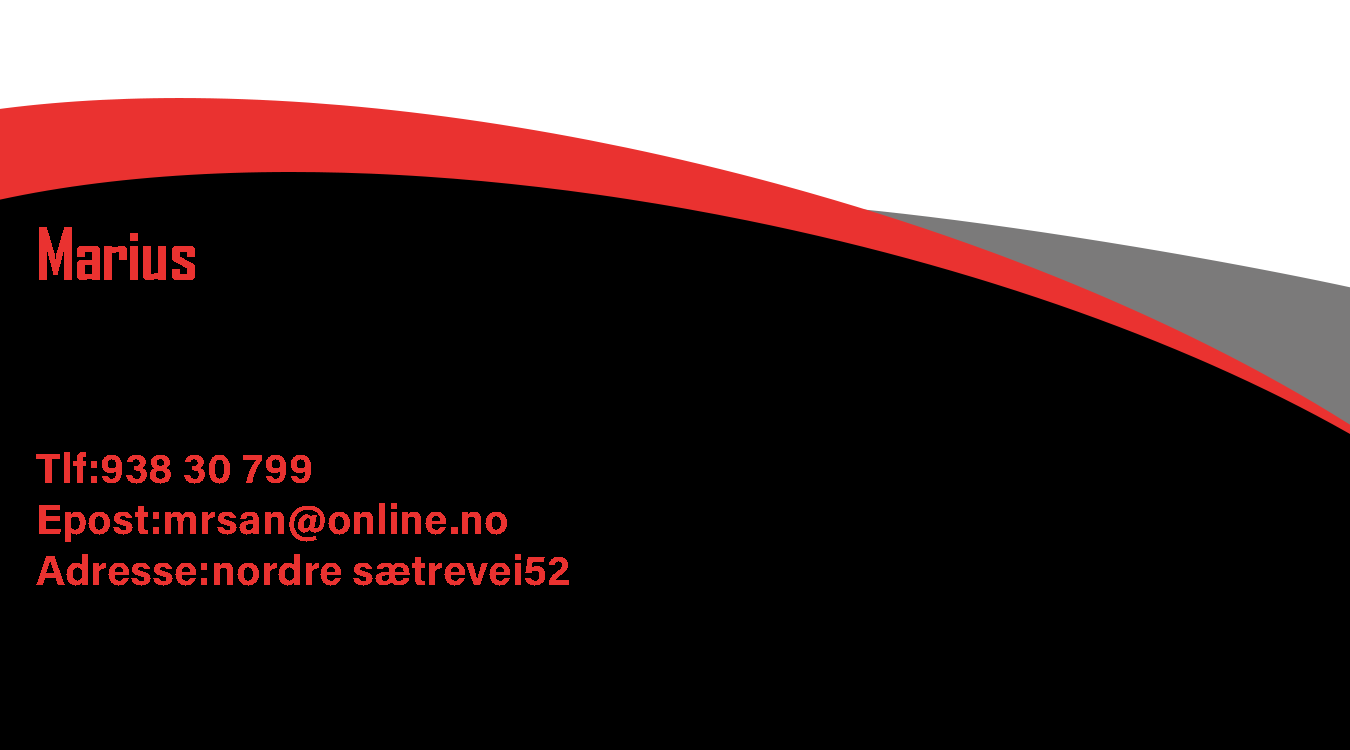
<style>
.page{position:relative;width:1350px;height:750px;background:#000000}
.page>*{position:absolute;margin:0}
.t1{font:42.3px "AcuminConcept-Bold";color:#ea3230}
.t2{font:68.8px "AgencyFB-Bold";color:#ea3230}
</style>
<div class="page">
<p class="t1" style="left:36px;top:227px;width:533px;height:359px"><span class="t2">Marius<br><br><br></span>Tlf:938 30 799<br>Epost:mrsan@online.no<br>Adresse:nordre sætrevei52</p>
</div>
